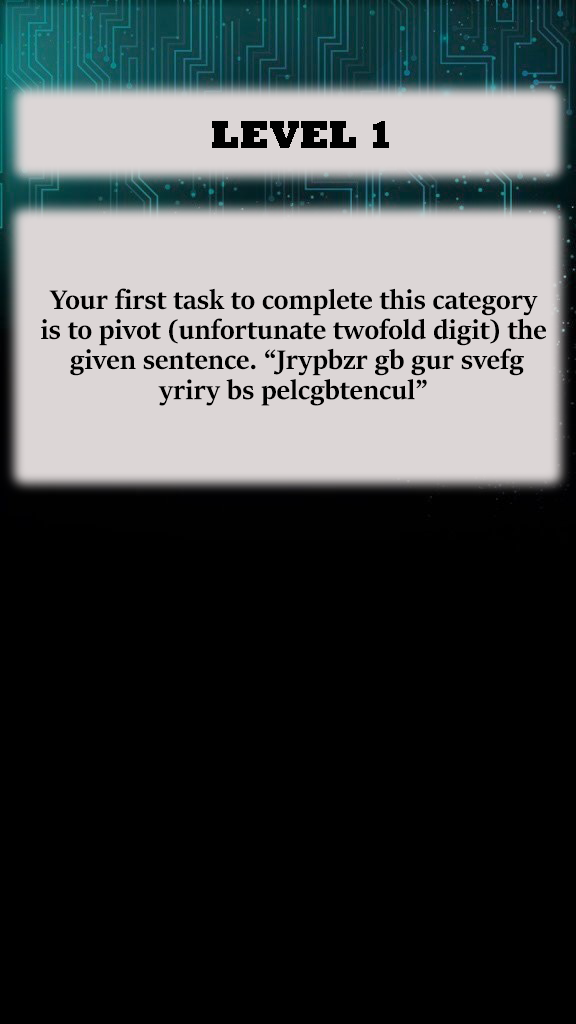
<style>
.page{position:relative;width:576px;height:1024px;background:#000000}
.page>*{position:absolute;margin:0}
.t1{font:40px "Rockwell-ExtraBold";color:#000000}
.t2{font:30px/10px "SitkaBanner-Bold";color:#000000}
</style>
<div class="page">
<p class="t1" style="left:212px;top:121px;width:177px;height:27px">LEVEL 1</p>
<p class="t2" style="left:41px;top:288px;width:505px;height:118px;text-align:center">Your first task to complete this category<br><br><br>is to pivot (unfortunate twofold digit) the<br><br><br> given sentence. “Jrypbzr gb gur svefg <br><br><br>yriry bs pelcgbtencul”</p>
</div>
